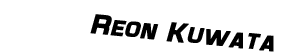
<style>
.page{position:relative;width:283px;height:56px;background:#ffffff}
.page>*{position:absolute;margin:0}
.t1{font:28px "Maximus";color:#000000;font-weight:bold;font-style:italic}
</style>
<div class="page">
<p class="t1" style="left:90px;top:14px;width:184px;height:38px;rotate:6deg">Reon Kuwata</p>
</div>
